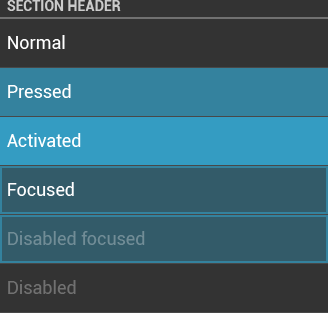
<style>
.page{position:relative;width:328px;height:313px;background:#333333}
.page>*{position:absolute;margin:0}
.t1{font:14px "Roboto-Bold";color:#cccccc}
.t2{font:18px "Roboto-Regular";color:#ffffff}
.t3{font:18px "Roboto-Regular";color:#718d96}
.t4{font:18px "Roboto-Regular";color:#717171}
</style>
<div class="page">
<p class="t1" style="left:7px;top:0px;width:114px;height:11px">SECTION HEADER</p>
<p class="t2" style="left:8px;top:35px;width:57px;height:14px">Normal</p>
<p class="t2" style="left:8px;top:84px;width:63px;height:14px">Pressed</p>
<p class="t2" style="left:7px;top:133px;width:74px;height:14px">Activated</p>
<p class="t2" style="left:8px;top:182px;width:66px;height:14px">Focused</p>
<p class="t3" style="left:8px;top:231px;width:137px;height:14px">Disabled focused</p>
<p class="t4" style="left:8px;top:280px;width:68px;height:14px">Disabled</p>
</div>
